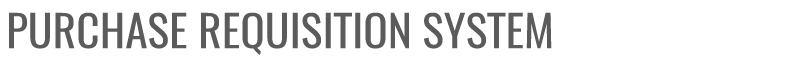
<style>
.page{position:relative;width:800px;height:60px;background:#ffffff}
.page>*{position:absolute;margin:0}
.t1{font:43.4px "Oswald-Regular";color:#5b5b5c;text-transform:uppercase;scale:1.05 1}
</style>
<div class="page">
<p class="t1" style="left:9px;top:12px;width:543px;height:43px">purchase requisition system</p>
</div>
